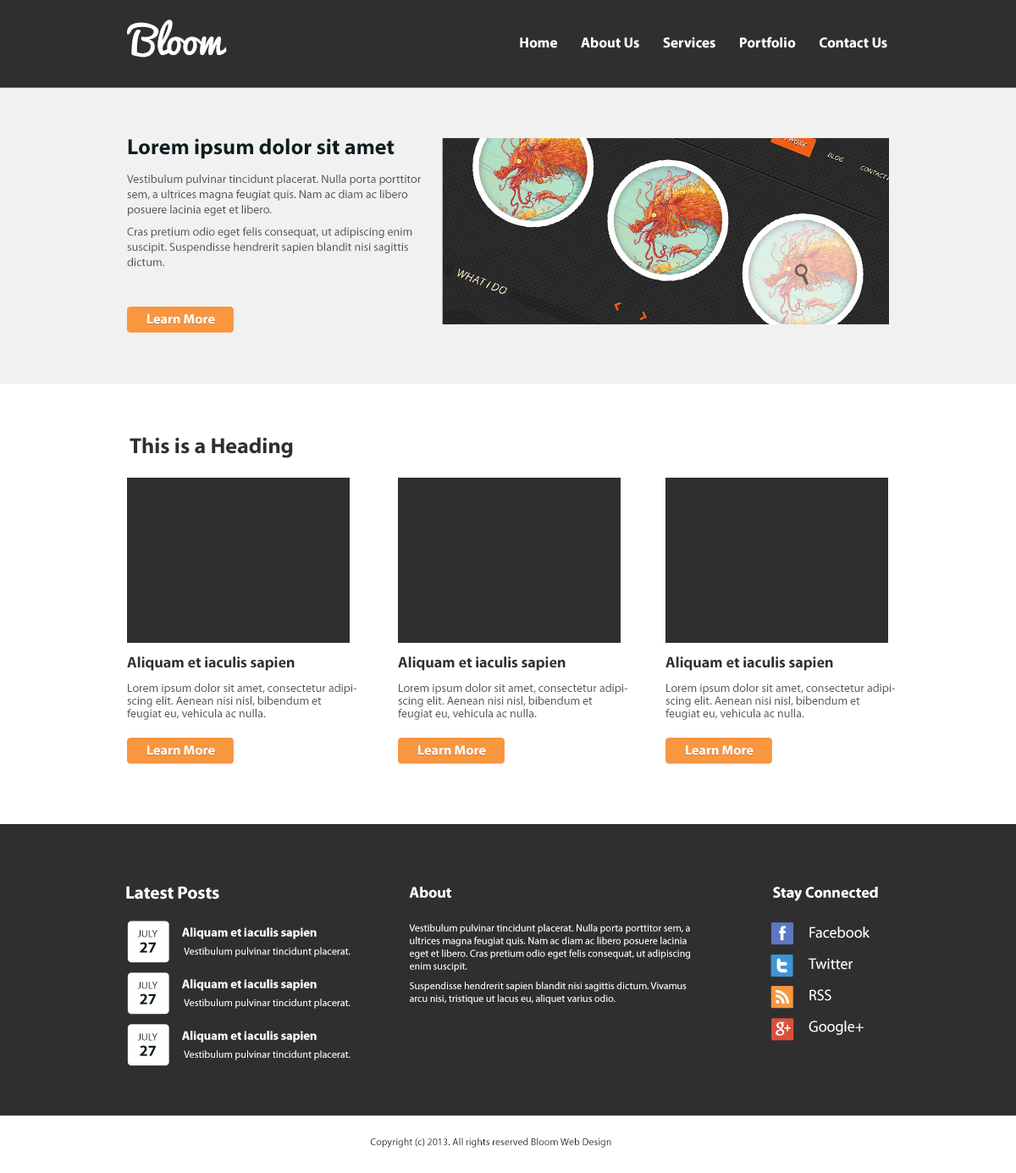
<style>
.page{position:relative;width:1016px;height:1173px;background:#2f2f2f}
.page>*{position:absolute;margin:0}
.t1{font:38.1px "Pacifico";color:#ffffff}
.t2{font:14.4px "MyriadPro-Bold";color:#ffffff}
.t3{font:22px "MyriadPro-Bold";color:#0e1d1f}
.t4{font:11.9px/15.2px "MyriadPro-Regular";color:#565656}
.t5{font:13.6px "MyriadPro-Bold";color:#ffffff}
.t6{font:22px "MyriadPro-Bold";color:#2f2f2f}
.t7{font:15.2px "MyriadPro-Bold";color:#303030}
.t8{font:11.9px/12.7px "MyriadPro-Regular";color:#585858}
.t9{font:17.8px "MyriadPro-Bold";color:#ffffff}
.t10{font:15.2px "MyriadPro-Bold";color:#ffffff}
.t11{font:12.3px "MyriadPro-Bold";color:#ffffff}
.t12{font:10.2px/12.7px "MyriadPro-Regular";color:#ffffff}
.t13{font:15.2px/3.4px "MyriadPro-Regular";color:#ffffff}
.t14{font:10.3px "MyriadPro-Regular";color:#0e1d1f}
.t15{font:15.5px "MyriadPro-Bold";color:#0e1d1f}
.t16{font:10.3px "MyriadPro-Regular";color:#ffffff}
.t17{font:10.2px "MyriadPro-Regular";color:#0e1d1f}
</style>
<div class="page">
<p class="t1" style="left:127px;top:19px;width:100px;height:39px">Bloom</p>
<p class="t2" style="left:520px;top:36px;width:368px;height:12px">Home        About Us        Services        Portfolio        Contact Us</p>
<p class="t3" style="left:128px;top:138px;width:267px;height:21px">Lorem ipsum dolor sit amet</p>
<p class="t4" style="left:127px;top:174px;width:294px;height:93px">Vestibulum pulvinar tincidunt placerat. Nulla porta porttitor sem, a ultrices magna feugiat quis. Nam ac diam ac libero posuere lacinia eget et libero. <br>Cras pretium odio eget felis consequat, ut adipiscing enim suscipit. Suspendisse hendrerit sapien blandit nisi sagittis dictum.</p>
<p class="t5" style="left:147px;top:314px;width:68px;height:10px">Learn More</p>
<p class="t6" style="left:130px;top:437px;width:163px;height:21px">This is a Heading</p>
<p class="t7" style="left:127px;top:656px;width:168px;height:15px">Aliquam et iaculis sapien</p>
<p class="t7" style="left:398px;top:656px;width:168px;height:15px">Aliquam et iaculis sapien</p>
<p class="t7" style="left:666px;top:656px;width:167px;height:15px">Aliquam et iaculis sapien</p>
<p class="t8" style="left:127px;top:684px;width:230px;height:36px">Lorem ipsum dolor sit amet, consectetur adipiscing elit. Aenean nisi nisl, bibendum et feugiat eu, vehicula ac nulla.</p>
<p class="t8" style="left:398px;top:684px;width:230px;height:36px">Lorem ipsum dolor sit amet, consectetur adipiscing elit. Aenean nisi nisl, bibendum et feugiat eu, vehicula ac nulla.</p>
<p class="t8" style="left:666px;top:684px;width:229px;height:36px">Lorem ipsum dolor sit amet, consectetur adipiscing elit. Aenean nisi nisl, bibendum et feugiat eu, vehicula ac nulla.</p>
<p class="t5" style="left:147px;top:745px;width:68px;height:11px">Learn More</p>
<p class="t5" style="left:418px;top:745px;width:68px;height:11px">Learn More</p>
<p class="t5" style="left:686px;top:745px;width:68px;height:11px">Learn More</p>
<p class="t9" style="left:126px;top:886px;width:93px;height:14px">Latest Posts</p>
<p class="t10" style="left:409px;top:887px;width:42px;height:11px">About</p>
<p class="t10" style="left:773px;top:887px;width:105px;height:14px">Stay Connected</p>
<p class="t11" style="left:182px;top:928px;width:135px;height:11px">Aliquam et iaculis sapien</p>
<p class="t12" style="left:409px;top:924px;width:281px;height:81px">Vestibulum pulvinar tincidunt placerat. Nulla porta porttitor sem, a ultrices magna feugiat quis. Nam ac diam ac libero posuere lacinia eget et libero. Cras pretium odio eget felis consequat, ut adipiscing enim suscipit. <br>Suspendisse hendrerit sapien blandit nisi sagittis dictum. Vivamus arcu nisi, tristique ut lacus eu, aliquet varius odio.</p>
<p class="t13" style="left:809px;top:927px;width:61px;height:108px">Facebook<br><br><br>Twitter<br><br><br>RSS<br><br><br>Google+</p>
<p class="t14" style="left:137px;top:930px;width:21px;height:8px">JULY</p>
<p class="t15" style="left:140px;top:942px;width:16px;height:11px">27</p>
<p class="t16" style="left:184px;top:947px;width:167px;height:10px">Vestibulum pulvinar tincidunt placerat.</p>
<p class="t14" style="left:137px;top:982px;width:21px;height:7px">JULY</p>
<p class="t11" style="left:182px;top:979px;width:135px;height:12px">Aliquam et iaculis sapien</p>
<p class="t15" style="left:140px;top:994px;width:16px;height:11px">27</p>
<p class="t16" style="left:184px;top:999px;width:167px;height:10px">Vestibulum pulvinar tincidunt placerat.</p>
<p class="t14" style="left:137px;top:1033px;width:21px;height:8px">JULY</p>
<p class="t11" style="left:182px;top:1031px;width:135px;height:12px">Aliquam et iaculis sapien</p>
<p class="t15" style="left:140px;top:1045px;width:16px;height:11px">27</p>
<p class="t16" style="left:184px;top:1050px;width:167px;height:10px">Vestibulum pulvinar tincidunt placerat.</p>
<p class="t17" style="left:370px;top:1138px;width:242px;height:10px">Copyright (c) 2013. All rights reserved Bloom Web Design</p>
</div>
